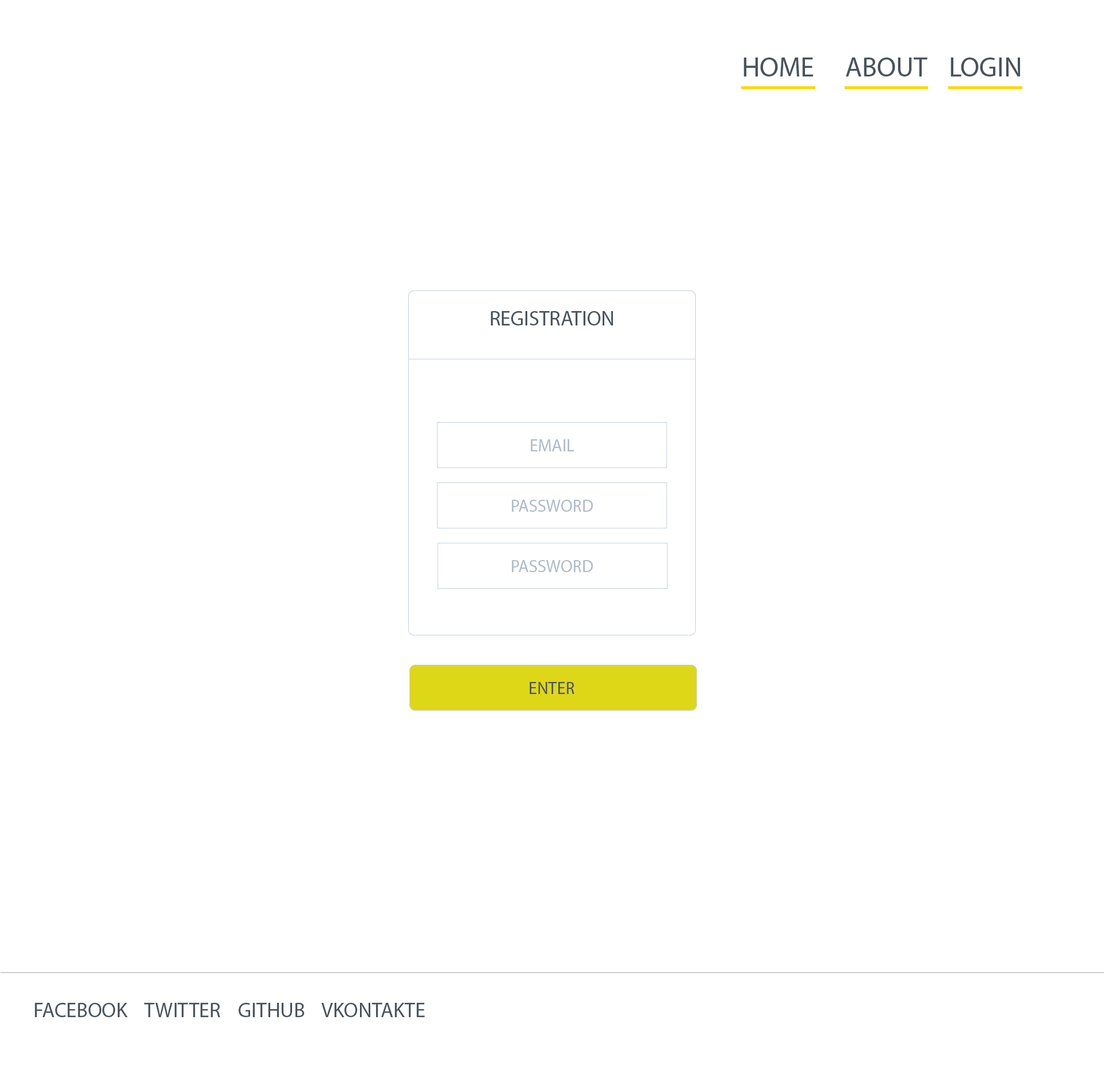
<style>
.page{position:relative;width:1104px;height:1081px;background:#ffffff}
.page>*{position:absolute;margin:0}
.t1{font:27.6px "MyriadPro-Regular";color:#49535e}
.t2{font:20.7px "MyriadPro-Regular";color:#49535e}
.t3{font:17.2px "MyriadPro-Regular";color:#aebbca}
.t4{font:17.2px "MyriadPro-Regular";color:#49535e}
</style>
<div class="page">
<p class="t1" style="left:743px;top:57px;width:70px;height:19px">HOME</p>
<p class="t1" style="left:845px;top:57px;width:82px;height:19px">ABOUT</p>
<p class="t1" style="left:950px;top:57px;width:70px;height:19px">LOGIN</p>
<p class="t2" style="left:490px;top:311px;width:123px;height:14px">REGISTRATION</p>
<p class="t3" style="left:531px;top:439px;width:43px;height:12px">EMAIL</p>
<p class="t3" style="left:512px;top:499px;width:81px;height:13px">PASSWORD</p>
<p class="t3" style="left:512px;top:560px;width:81px;height:12px">PASSWORD</p>
<p class="t4" style="left:529px;top:682px;width:45px;height:12px">ENTER</p>
<p class="t2" style="left:34px;top:1002px;width:391px;height:15px">FACEBOOK    TWITTER    GITHUB    VKONTAKTE</p>
</div>
